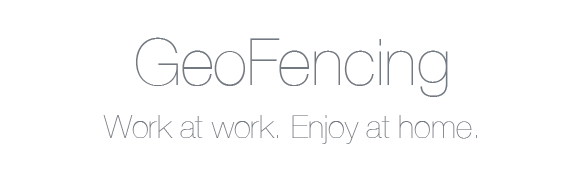
<style>
.page{position:relative;width:577px;height:173px;background:#ffffff}
.page>*{position:absolute;margin:0}
.t1{font:65px "HelveticaNeue-UltraLight";color:#737980}
.t2{font:32px "HelveticaNeue-UltraLight";color:#737980}
</style>
<div class="page">
<p class="t1" style="left:135px;top:37px;width:313px;height:60px">GeoFencing</p>
<p class="t2" style="left:103px;top:115px;width:374px;height:29px">Work at work. Enjoy at home.</p>
</div>
